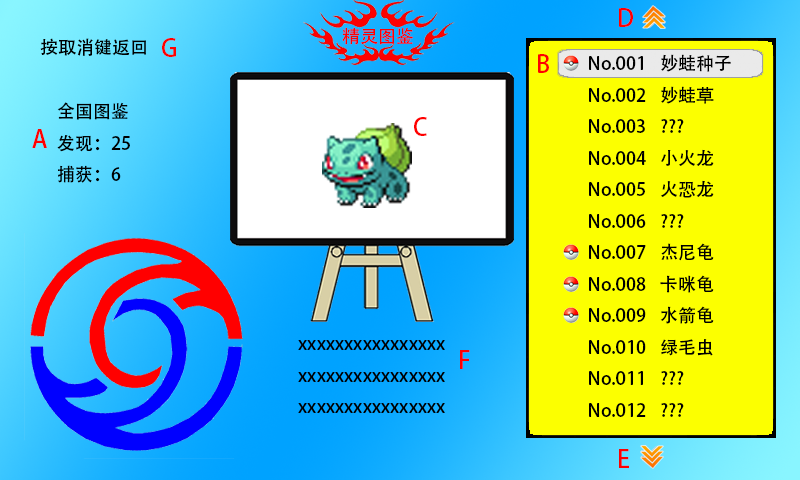
<style>
.page{position:relative;width:800px;height:480px;background:#fcff00}
.page>*{position:absolute;margin:0}
.t1{font:24px "AdobeHeitiStd-Regular";color:#ff0000}
.t2{font:18px "AdobeHeitiStd-Regular";color:#ff0000}
.t3{font:18px "AdobeHeitiStd-Regular";color:#000000}
</style>
<div class="page">
<p class="t1" style="left:619px;top:8px;width:14px;height:19px">D</p>
<p class="t2" style="left:342px;top:27px;width:71px;height:18px">精灵图鉴</p>
<p class="t3" style="left:40px;top:38px;width:106px;height:18px">按取消键返回</p>
<p class="t1" style="left:162px;top:38px;width:14px;height:19px">G</p>
<p class="t1" style="left:538px;top:54px;width:11px;height:19px">B</p>
<p class="t3" style="left:589px;top:54px;width:142px;height:363px">No.001 妙蛙种子<br>No.002 妙蛙草<br>No.003 ???<br>No.004 小火龙<br>No.005 火恐龙<br>No.006 ???<br>No.007 杰尼龟<br>No.008 卡咪龟<br>No.009 水箭龟<br>No.010 绿毛虫<br>No.011 ???<br>No.012 ???</p>
<p class="t3" style="left:57px;top:102px;width:73px;height:81px">全国图鉴<br>发现：25<br>捕获：6</p>
<p class="t1" style="left:414px;top:117px;width:13px;height:19px">C</p>
<p class="t1" style="left:32px;top:129px;width:15px;height:19px">A</p>
<p class="t3" style="left:298px;top:340px;width:147px;height:73px">xxxxxxxxxxxxxxxx<br>xxxxxxxxxxxxxxxx<br>xxxxxxxxxxxxxxxx</p>
<p class="t1" style="left:460px;top:350px;width:10px;height:19px">F</p>
<p class="t1" style="left:619px;top:449px;width:10px;height:19px">E</p>
</div>
